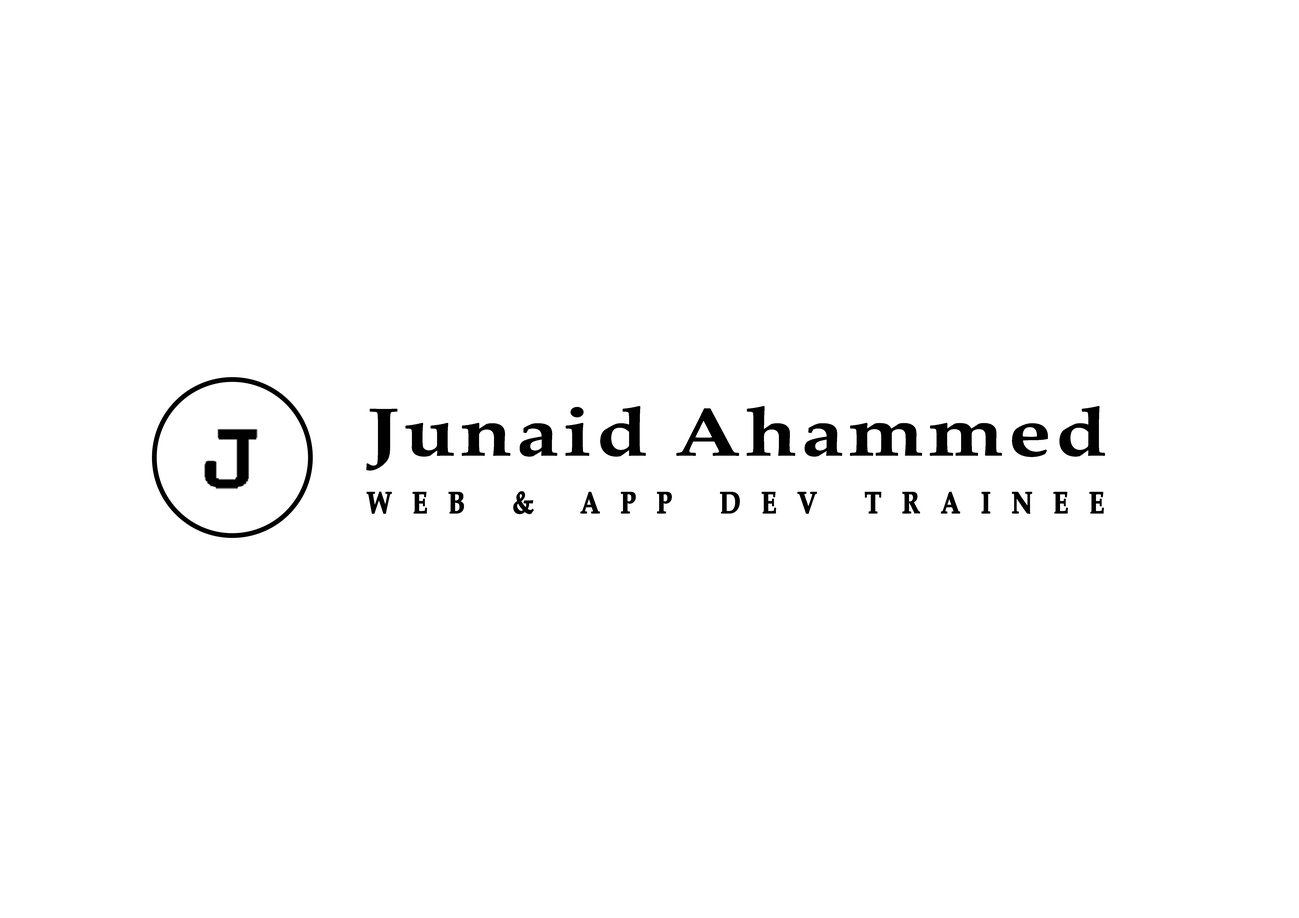
<style>
.page{position:relative;width:1299px;height:918px;background:#ffffff}
.page>*{position:absolute;margin:0}
.t1{font:67.9px "PalatinoLinotype-Bold";letter-spacing:0.05em;color:#000000;scale:1.26 1}
.t2{font:30.2px "PalatinoLinotype-Bold";letter-spacing:0.8em;color:#000000;font-weight:bold;scale:0.83 1}
</style>
<div class="page">
<p class="t1" style="left:366px;top:406px;width:739px;height:65px">Junaid Ahammed</p>
<p class="t2" style="left:367px;top:491px;width:737px;height:23px">WEB &amp; APP DEV TRAINEE</p>
</div>
